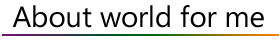
<style>
.page{position:relative;width:280px;height:40px;background:#ffffff}
.page>*{position:absolute;margin:0}
.t1{font:29.2px "SegoeUI";color:#000000}
</style>
<div class="page">
<p class="t1" style="left:12px;top:5px;width:252px;height:23px">About world for me</p>
</div>
